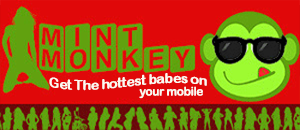
<style>
.page{position:relative;width:300px;height:130px;background:#e00809}
.page>*{position:absolute;margin:0}
.t1{font:14px "ArialRoundedMTBold";letter-spacing:-0.035em;color:#fbfaf2}
.t2{font:12px "ArialRoundedMTBold";letter-spacing:-0.035em;color:#fbfaf2}
</style>
<div class="page">
<p class="t1" style="left:49px;top:73px;width:158px;height:18px">Get The hottest babes on</p>
<p class="t2" style="left:139px;top:86px;width:64px;height:13px">your mobile</p>
</div>
